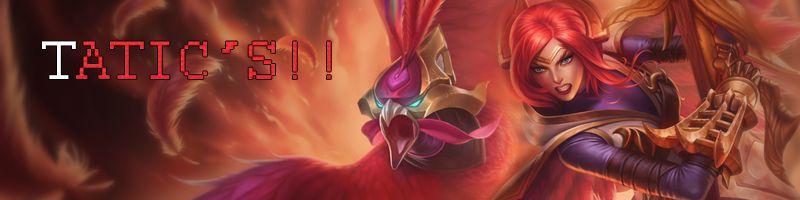
<style>
.page{position:relative;width:800px;height:200px}
.page>*{position:absolute;margin:0}
.t1{font:60px "Courier";color:#e72125}
.t2{font:60px "Courier";color:#ffffff}
</style>
<div class="page">
<p class="t1" style="left:42px;top:41px;width:289px;height:38px"><span class="t2">T</span>ATIC’S!!</p>
</div>
